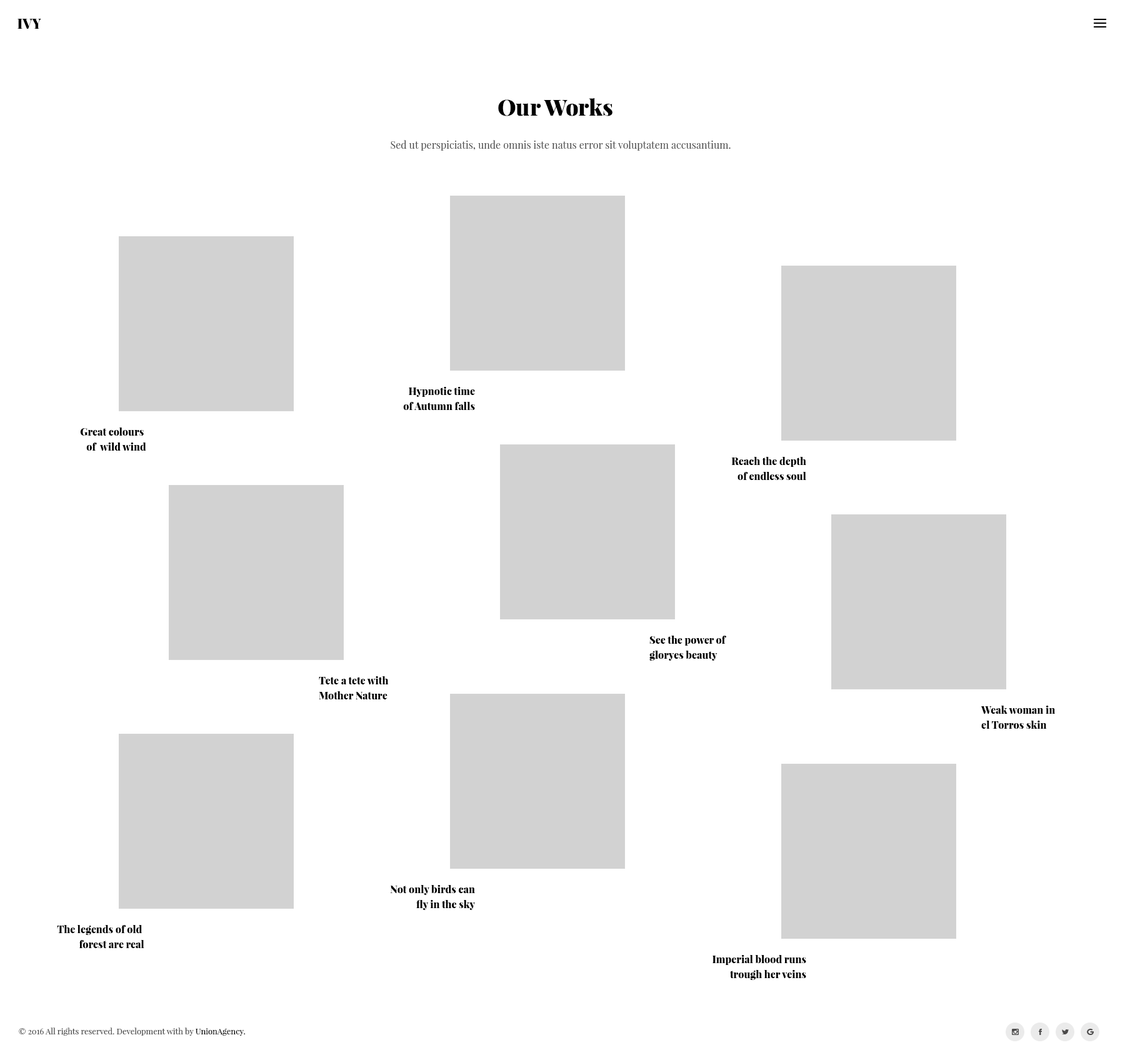
<style>
.page{position:relative;width:1125px;height:1060px;background:#ffffff}
.page>*{position:absolute;margin:0}
.t1{font:13.7px "PlayfairDisplay-Black";color:#000000}
.t2{font:22.5px "PlayfairDisplay-Black";color:#000000}
.t3{font:10px "PlayfairDisplay-Regular";color:#494949}
.t4{font:10px/15px "PlayfairDisplay-Black";color:#000000}
.t5{font:8.1px "PlayfairDisplay-Regular";color:#494949}
.t6{font:8.1px "PlayfairDisplay-Regular";color:#000000}
</style>
<div class="page">
<p class="t1" style="left:17px;top:19px;width:24px;height:10px">IVY</p>
<p class="t2" style="left:498px;top:98px;width:114px;height:18px">Our Works</p>
<p class="t3" style="left:391px;top:140px;width:340px;height:11px">Sed ut perspiciatis, unde omnis iste natus error sit voluptatem accusantium.</p>
<p class="t4" style="left:403px;top:387px;width:72px;height:23px;text-align:right">Hypnotic time<br>of Autumn falls</p>
<p class="t4" style="left:80px;top:427px;width:66px;height:24px;text-align:right">Great colours <br>of  wild wind</p>
<p class="t4" style="left:731px;top:457px;width:75px;height:23px;text-align:right">Reach the depth<br>of endless soul</p>
<p class="t4" style="left:649px;top:636px;width:77px;height:25px">See the power of<br>gloryes beauty</p>
<p class="t4" style="left:319px;top:676px;width:70px;height:23px">Tete a tete with<br>Mother Nature</p>
<p class="t4" style="left:981px;top:706px;width:75px;height:23px">Weak woman in<br>el Torros skin</p>
<p class="t4" style="left:390px;top:885px;width:85px;height:25px;text-align:right">Not only birds can<br>fly in the sky</p>
<p class="t4" style="left:57px;top:925px;width:87px;height:23px;text-align:right">The legends of old <br>forest are real</p>
<p class="t4" style="left:712px;top:955px;width:94px;height:25px;text-align:right">Imperial blood runs<br>trough her veins</p>
<p class="t5" style="left:19px;top:1027px;width:227px;height:9px">© 2016 All rights reserved. Development with by <span class="t6">UnionAgency.</span></p>
</div>
